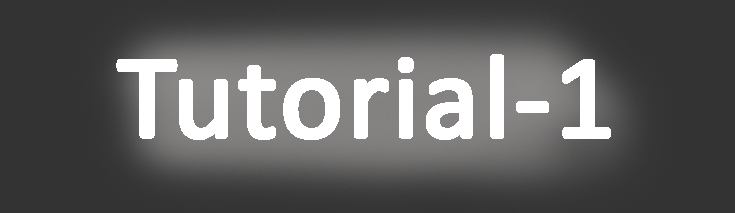
<style>
.page{position:relative;width:735px;height:213px;background:#333333}
.page>*{position:absolute;margin:0}
.t1{font:120px "Calibri";color:#ffffff;font-weight:bold}
</style>
<div class="page">
<p class="t1" style="left:116px;top:54px;width:495px;height:86px">Tutorial-1</p>
</div>
